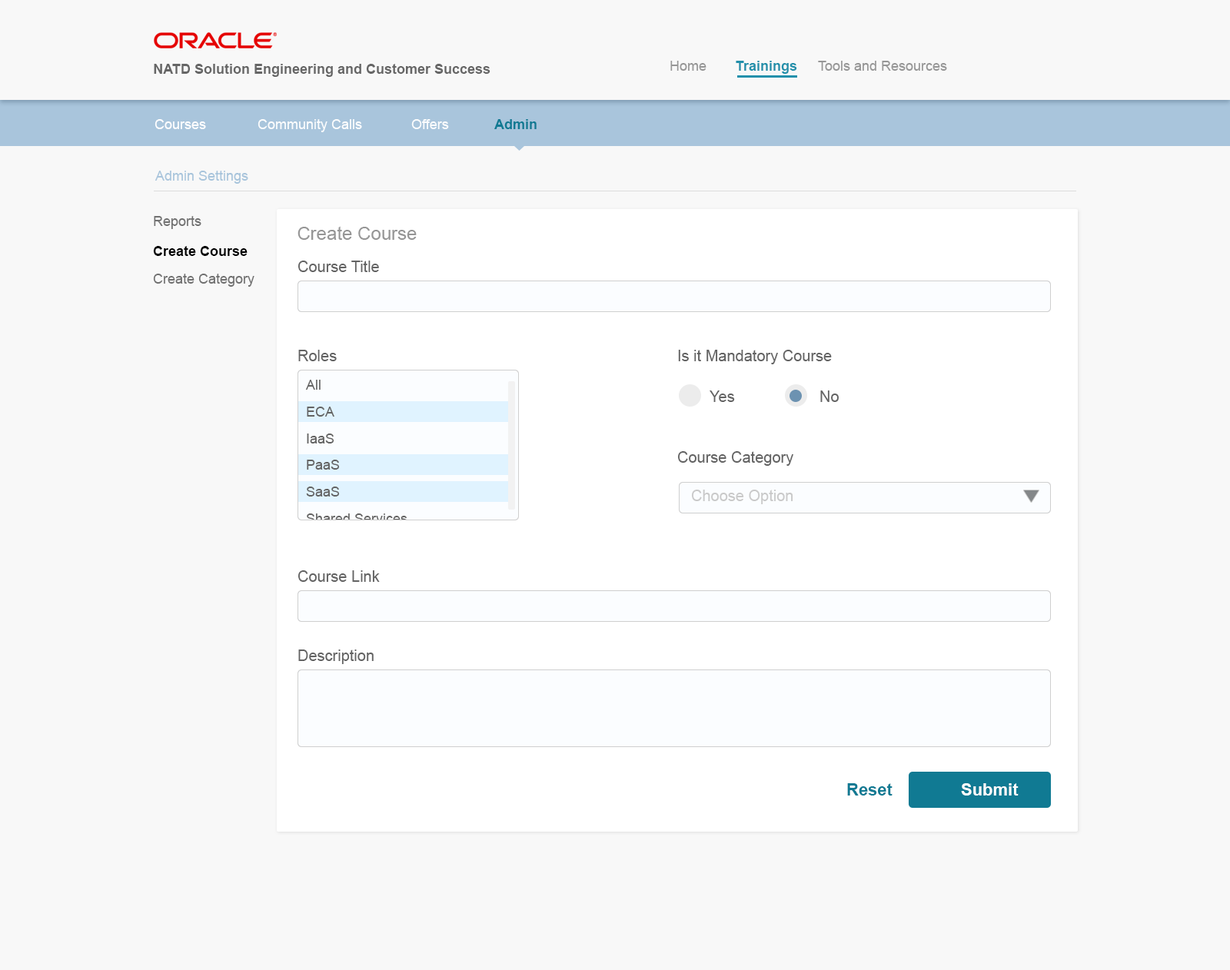
<style>
.page{position:relative;width:1230px;height:970px;background:#f8f8f8}
.page>*{position:absolute;margin:0}
.t1{font:13.8px "Arial-BoldMT";color:#666666}
.t2{font:13.8px "ArialMT";color:#969696}
.t3{font:13.8px "Arial-BoldMT";color:#2290ab}
.t4{font:13.8px "ArialMT";color:#ffffff}
.t5{font:13.8px "Arial-BoldMT";color:#00758f}
.t6{font:13.8px "ArialMT";color:#a9c5dc}
.t7{font:13.8px "ArialMT";color:#717171}
.t8{font:18.4px "ArialMT";color:#969696}
.t9{font:13.8px "Arial-BoldMT";color:#000000}
.t10{font:15.4px "ArialMT";color:#636363}
.t11{font:13.8px "ArialMT";color:#636363}
.t12{font:15.4px "ArialMT";color:#cacaca}
.t13{font:13.8px "ArialMT"}
.t14{font:16.9px "Arial-BoldMT";color:#107a93}
.t15{font:16.9px "Arial-BoldMT";color:#ffffff}
</style>
<div class="page">
<p class="t1" style="left:154px;top:64px;width:336px;height:13px">NATD Solution Engineering and Customer Success</p>
<p class="t2" style="left:670px;top:61px;width:36px;height:10px">Home</p>
<p class="t3" style="left:735px;top:61px;width:62px;height:13px">Trainings</p>
<p class="t2" style="left:818px;top:61px;width:129px;height:10px">Tools and Resources</p>
<p class="t4" style="left:154px;top:119px;width:52px;height:10px">Courses</p>
<p class="t4" style="left:257px;top:119px;width:105px;height:13px;opacity:0.95">Community Calls</p>
<p class="t4" style="left:411px;top:119px;width:38px;height:10px;opacity:0.95">Offers</p>
<p class="t5" style="left:494px;top:119px;width:42px;height:10px;opacity:0.95">Admin</p>
<p class="t6" style="left:154px;top:171px;width:94px;height:13px">Admin Settings</p>
<p class="t7" style="left:154px;top:216px;width:47px;height:13px">Reports</p>
<p class="t8" style="left:297px;top:226px;width:120px;height:14px">Create Course</p>
<p class="t9" style="left:153px;top:246px;width:94px;height:10px">Create Course</p>
<p class="t10" style="left:297px;top:261px;width:82px;height:11px">Course Title</p>
<p class="t7" style="left:153px;top:274px;width:101px;height:13px">Create Category</p>
<p class="t10" style="left:298px;top:350px;width:39px;height:11px">Roles</p>
<p class="t10" style="left:678px;top:350px;width:153px;height:14px">Is it Mandatory Course</p>
<p class="t11" style="left:305px;top:380px;width:15px;height:10px">All</p>
<p class="t10" style="left:709px;top:390px;width:26px;height:12px">Yes</p>
<p class="t10" style="left:820px;top:390px;width:18px;height:12px">No</p>
<p class="t11" style="left:307px;top:407px;width:27px;height:10px">ECA</p>
<p class="t11" style="left:307px;top:433px;width:27px;height:10px">IaaS</p>
<p class="t11" style="left:307px;top:460px;width:33px;height:10px">PaaS</p>
<p class="t10" style="left:677px;top:451px;width:116px;height:15px">Course Category</p>
<p class="t11" style="left:306px;top:486px;width:34px;height:10px">SaaS</p>
<p class="t12" style="left:691px;top:490px;width:102px;height:14px">Choose Option</p>
<p class="t13" style="left:306px;top:513px;width:101px;height:10px">Shared Services</p>
<p class="t10" style="left:297px;top:570px;width:83px;height:12px">Course Link</p>
<p class="t10" style="left:298px;top:649px;width:75px;height:15px">Description</p>
<p class="t14" style="left:847px;top:783px;width:45px;height:12px">Reset</p>
<p class="t15" style="left:961px;top:783px;width:57px;height:12px">Submit</p>
</div>
